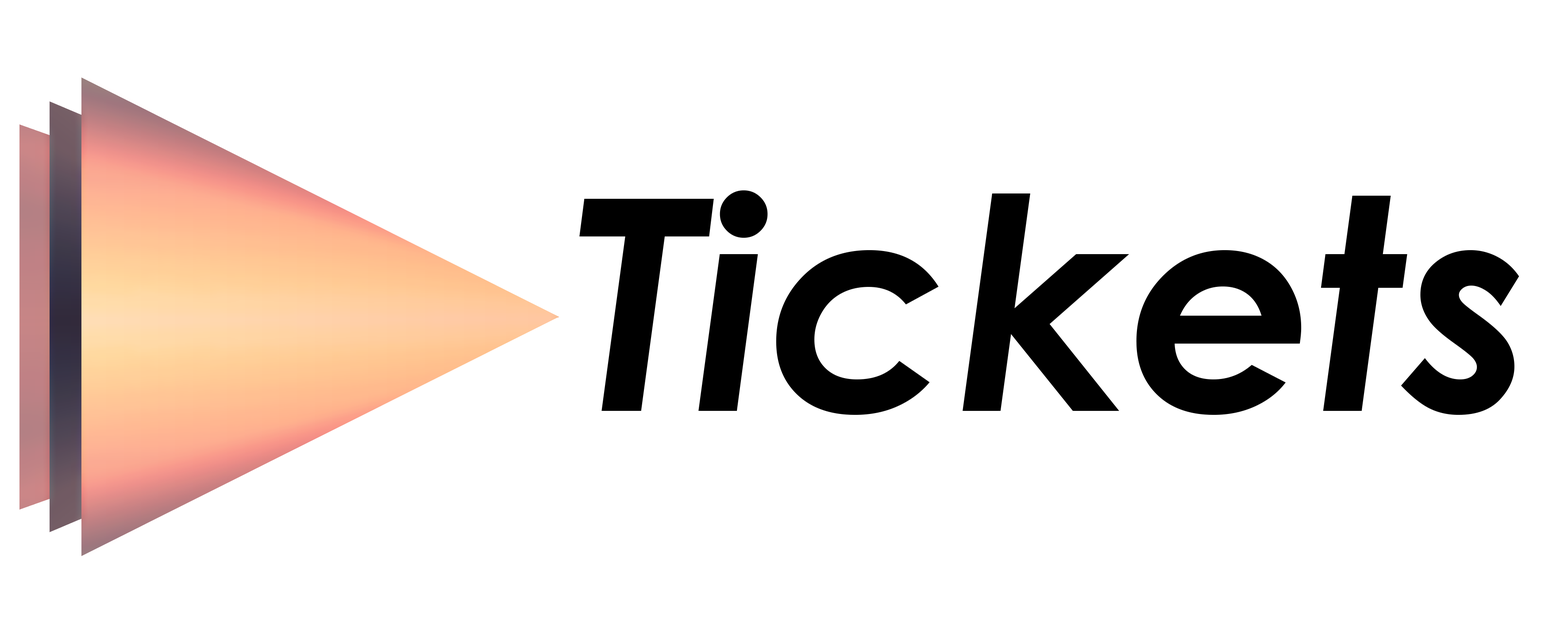
<style>
.page{position:relative;width:1568px;height:634px;background:#ffffff}
.page>*{position:absolute;margin:0}
.t1{font:295px "CenturyGothic-BoldItalic";color:#000000}
</style>
<div class="page">
<p class="t1" style="left:579px;top:190px;width:940px;height:225px">Tickets</p>
</div>
